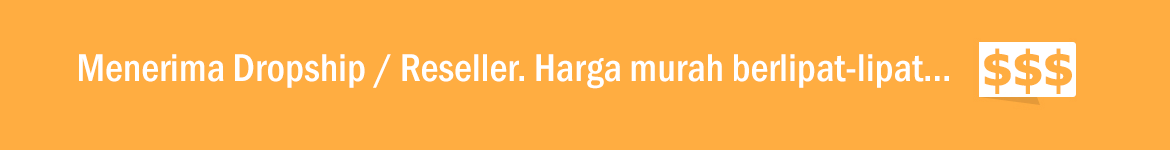
<style>
.page{position:relative;width:1170px;height:150px;background:#ffad41}
.page>*{position:absolute;margin:0}
.t1{font:40px "FranklinGothic-MediumCond";color:#ffffff}
.t2{font:48px "Tahoma-Bold";color:#ffad41}
</style>
<div class="page">
<p class="t1" style="left:79px;top:54px;width:870px;height:35px">Menerima Dropship / Reseller. Harga murah berlipat-lipat...</p>
<p class="t2" style="left:984px;top:48px;width:88px;height:46px">$$$</p>
</div>
